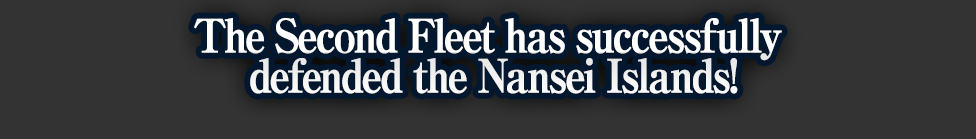
<style>
.page{position:relative;width:976px;height:139px;background:#333333}
.page>*{position:absolute;margin:0}
.t1{font:46px/40px "RyuminPro-ExBold";letter-spacing:-0.08em;color:#ffffff;font-weight:bold;scale:0.9 1}
</style>
<div class="page">
<p class="t1" style="left:194px;top:18px;width:588px;height:76px;text-align:center">The Second Fleet has successfully<br> defended the Nansei Islands!</p>
</div>
